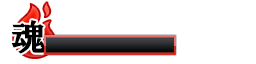
<style>
.page{position:relative;width:256px;height:64px;background:#ffffff}
.page>*{position:absolute;margin:0}
.t1{font:36px "HGSSoeiPresenceEB";letter-spacing:0.05em;color:#000000}
</style>
<div class="page">
<p class="t1" style="left:11px;top:20px;width:35px;height:34px">魂</p>
</div>
